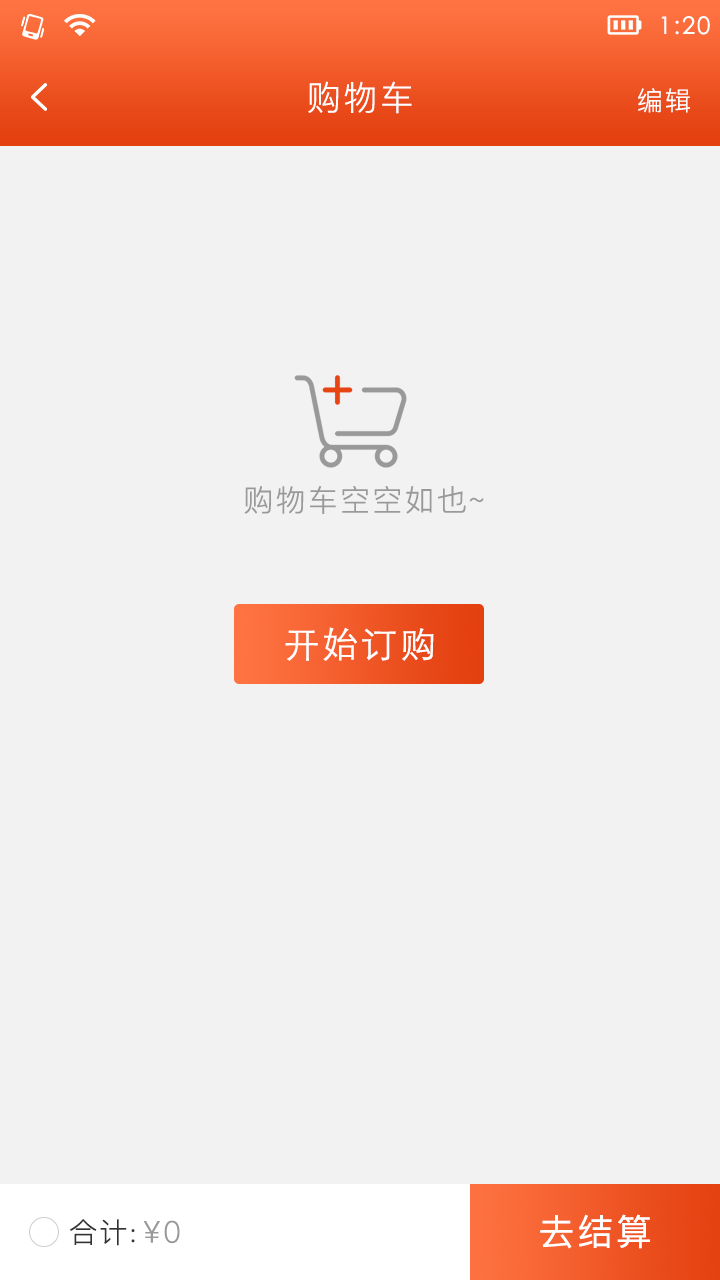
<style>
.page{position:relative;width:720px;height:1280px;background:#f2f2f2}
.page>*{position:absolute;margin:0}
.t1{font:24px "STXihei";letter-spacing:0.075em;color:#ffffff}
.t2{font:34px "PingFangSC-Light";letter-spacing:0.075em;color:#ffffff}
.t3{font:26px "PingFangSC-Light";letter-spacing:0.075em;color:#ffffff}
.t4{font:30px "PingFangSC-Light";letter-spacing:0.075em;color:#999999}
.t5{font:36px "STHeitiSC-Light";letter-spacing:0.075em;color:#ffffff}
.t6{font:36px "PingFangSC-Regular";letter-spacing:0.075em;color:#ffffff}
.t7{font:28px "PingFangSC-Light";letter-spacing:0.075em;color:#333333}
</style>
<div class="page">
<p class="t1" style="left:661px;top:16px;width:49px;height:19px">1:20</p>
<p class="t2" style="left:308px;top:81px;width:104px;height:33px">购物车</p>
<p class="t3" style="left:638px;top:88px;width:52px;height:25px">编辑</p>
<p class="t4" style="left:244px;top:486px;width:240px;height:28px">购物车空空如也~</p>
<p class="t5" style="left:285px;top:627px;width:149px;height:34px">开始订购</p>
<p class="t6" style="left:540px;top:1214px;width:110px;height:35px">去结算</p>
<p class="t7" style="left:70px;top:1219px;width:65px;height:27px">合计:</p>
<p class="t4" style="left:143px;top:1220px;width:37px;height:24px">¥0</p>
</div>
